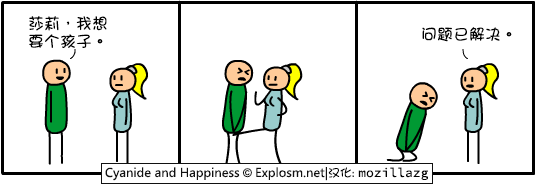
<style>
.page{position:relative;width:536px;height:185px;background:#ffffff}
.page>*{position:absolute;margin:0}
.t1{font:16px/18px "DFGirl";color:#000000}
.t2{font:16px "DFGirl";color:#000000}
</style>
<div class="page">
<p class="t1" style="left:29px;top:16px;width:78px;height:32px">莎莉，我想<br>要个孩子。</p>
<p class="t2" style="left:422px;top:27px;width:90px;height:15px">问题已解决。</p>
</div>
